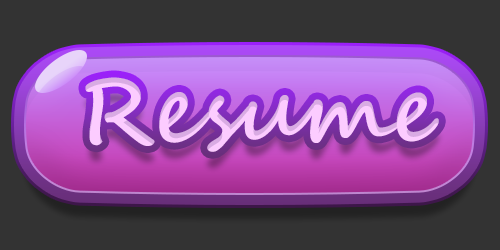
<style>
.page{position:relative;width:500px;height:250px;background:#333333}
.page>*{position:absolute;margin:0}
.t1{font:94.2px "SegoeScript-Bold";color:#fcccff;scale:0.92 1}
</style>
<div class="page">
<p class="t1" style="left:85px;top:77px;width:354px;height:75px">Resume</p>
</div>
